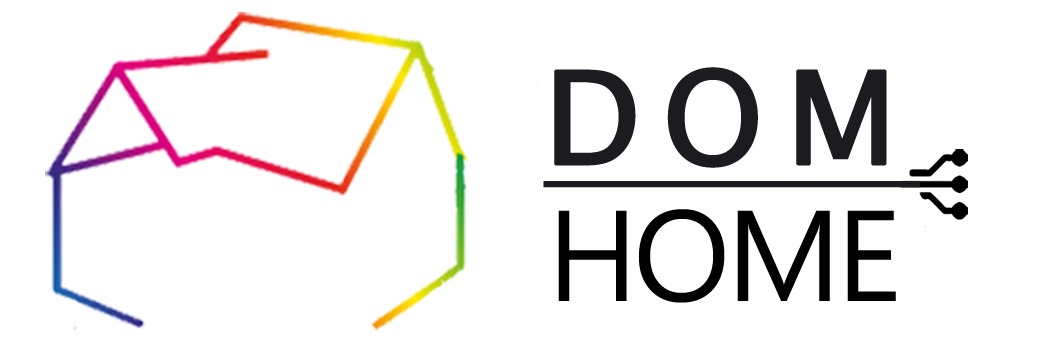
<style>
.page{position:relative;width:1055px;height:355px;background:#ffffff}
.page>*{position:absolute;margin:0}
.t1{font:128.9px "LucidaSans";letter-spacing:0.15em;color:#1c1c20;font-variant:small-caps;font-weight:bold;text-decoration:underline}
.t2{font:128.9px "Gadugi";letter-spacing:-0.04em;color:#000000}
</style>
<div class="page">
<p class="t1" style="left:543px;top:67px;width:377px;height:121px">DOM</p>
<p class="t2" style="left:558px;top:209px;width:338px;height:94px">HOME</p>
</div>
